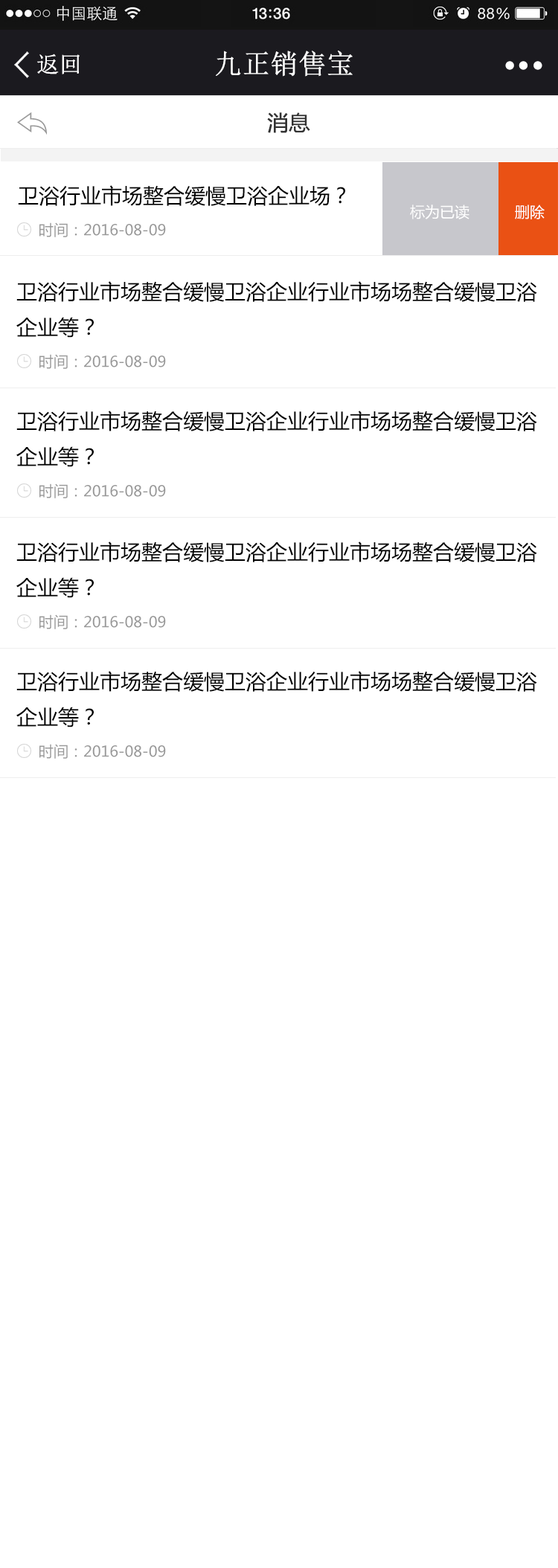
<style>
.page{position:relative;width:558px;height:1568px;background:#ffffff}
.page>*{position:absolute;margin:0}
.t1{font:22.3px "NSimSun";color:#ffffff;font-weight:bold}
.t2{font:27.3px "NSimSun";color:#ffffff;font-weight:bold}
.t3{font:20.8px "MicrosoftYaHei";color:#333333;font-weight:bold}
.t4{font:20.8px "MicrosoftYaHei";color:#000000}
.t5{font:14.9px "MicrosoftYaHei";color:#ffffff}
.t6{font:14.9px "MicrosoftYaHei";color:#999999}
.t7{font:20.8px/35.7px "MicrosoftYaHei";color:#000000}
</style>
<div class="page">
<p class="t1" style="left:37px;top:54px;width:43px;height:20px">返回</p>
<p class="t2" style="left:216px;top:51px;width:137px;height:26px">九正销售宝</p>
<p class="t3" style="left:267px;top:112px;width:43px;height:21px">消息</p>
<p class="t4" style="left:18px;top:185px;width:327px;height:21px">卫浴行业市场整合缓慢卫浴企业场？</p>
<p class="t5" style="left:410px;top:205px;width:59px;height:14px">标为已读</p>
<p class="t5" style="left:515px;top:205px;width:29px;height:14px">删除</p>
<p class="t6" style="left:39px;top:222px;width:127px;height:15px">时间：2016-08-09</p>
<p class="t7" style="left:16px;top:281px;width:521px;height:57px">卫浴行业市场整合缓慢卫浴企业行业市场场整合缓慢卫浴<br>企业等？</p>
<p class="t6" style="left:39px;top:354px;width:127px;height:15px">时间：2016-08-09</p>
<p class="t7" style="left:16px;top:411px;width:521px;height:56px">卫浴行业市场整合缓慢卫浴企业行业市场场整合缓慢卫浴<br>企业等？</p>
<p class="t6" style="left:39px;top:483px;width:127px;height:15px">时间：2016-08-09</p>
<p class="t7" style="left:16px;top:542px;width:521px;height:56px">卫浴行业市场整合缓慢卫浴企业行业市场场整合缓慢卫浴<br>企业等？</p>
<p class="t6" style="left:39px;top:614px;width:127px;height:15px">时间：2016-08-09</p>
<p class="t7" style="left:16px;top:671px;width:521px;height:56px">卫浴行业市场整合缓慢卫浴企业行业市场场整合缓慢卫浴<br>企业等？</p>
<p class="t6" style="left:39px;top:744px;width:127px;height:15px">时间：2016-08-09</p>
</div>
